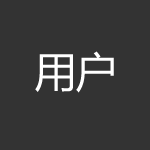
<style>
.page{position:relative;width:150px;height:150px;background:#333333}
.page>*{position:absolute;margin:0}
.t1{font:41.7px "MicrosoftYaHei";color:#ffffff}
</style>
<div class="page">
<p class="t1" style="left:35px;top:51px;width:79px;height:42px">用户</p>
</div>
